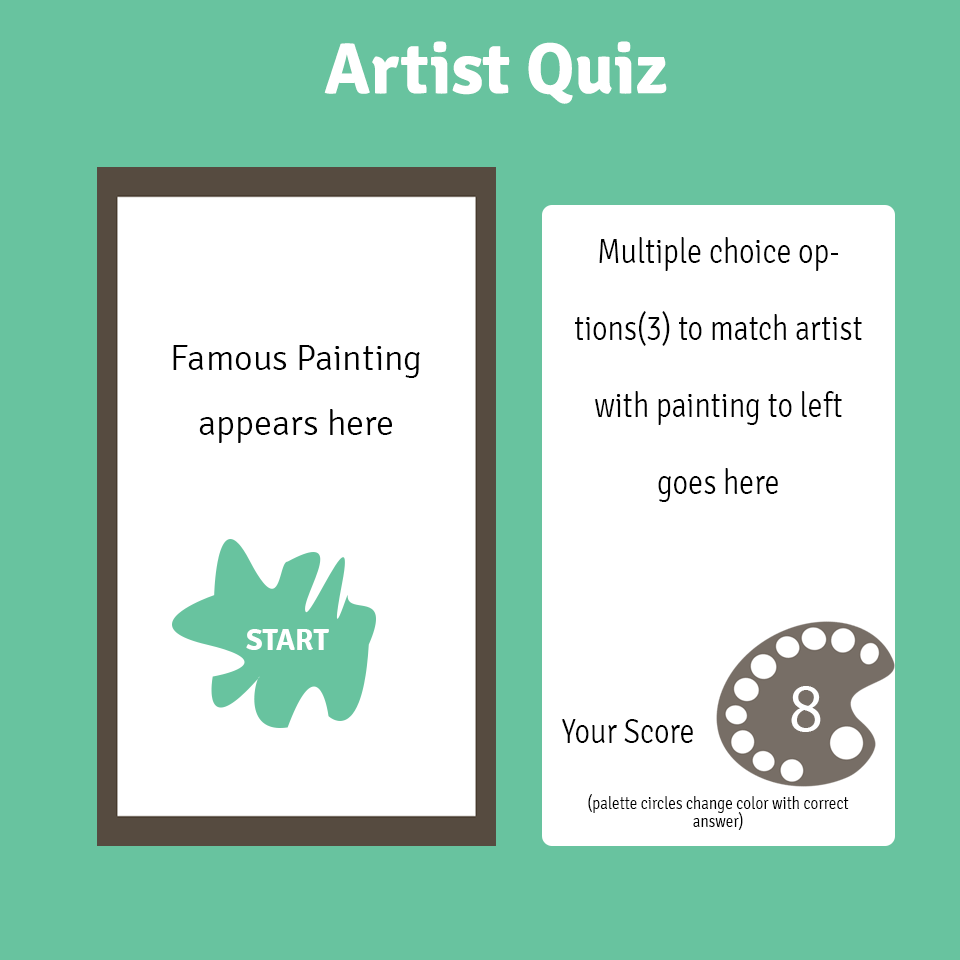
<style>
.page{position:relative;width:960px;height:960px;background:#68c39f}
.page>*{position:absolute;margin:0}
.t1{font:72px "Signika-Bold";color:#ffffff}
.t2{font:35.5px/76.9px "Signika-Light";color:#000000;scale:0.85 1}
.t3{font:35.5px/76.9px "Merriweather";color:#000000;scale:0.85 1}
.t4{font:35.5px/24px "Signika-Light";color:#000000;scale:0.85 1}
.t5{font:18px/18px "Signika-Light";color:#000000;scale:0.85 1}
.t6{font:36px/65px "Signika-Light";color:#000000}
.t7{font:30px "Signika-Bold";color:#ffffff}
.t8{font:30px "Signika-Light";color:#000000}
.t9{font:67.7px "Signika-Light";color:#ffffff}
</style>
<div class="page">
<p class="t1" style="left:324px;top:41px;width:343px;height:63px">Artist Quiz</p>
<p class="t2" style="left:561px;top:237px;width:301px;height:593px;text-align:center"><span class="t3"><br></span>Multiple choice options(3) to match artist with painting to left goes here<br><br><br><span class="t4"><br><br><br>Your Score<br><br><br></span><span class="t5">(palette circles change color with correct answer)</span></p>
<p class="t6" style="left:173px;top:345px;width:247px;height:98px;text-align:center">Famous Painting       appears here</p>
<p class="t7" style="left:246px;top:629px;width:83px;height:21px"><span class="t8"><br></span>START</p>
<p class="t9" style="left:791px;top:686px;width:30px;height:46px">8</p>
</div>
